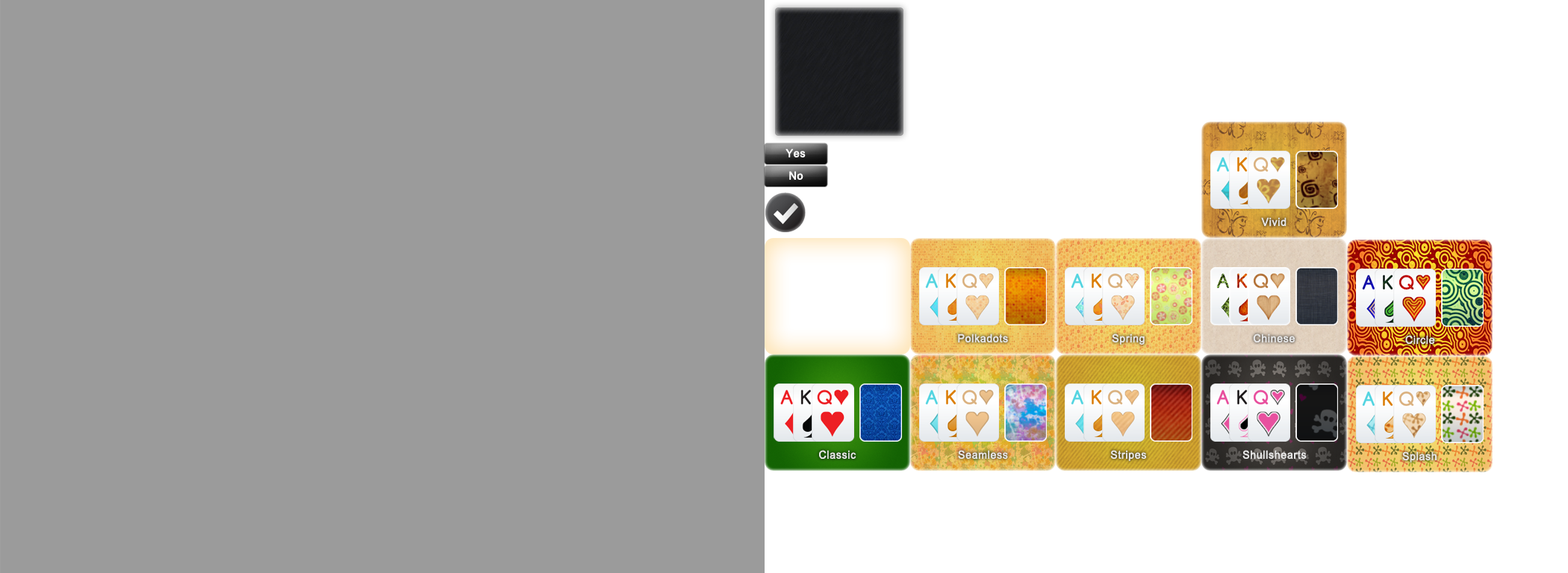
<style>
.page{position:relative;width:1568px;height:573px;background:#9b9b9b}
.page>*{position:absolute;margin:0}
.t1{font:11.1px "ArialMT";letter-spacing:0.025em;color:#ffffff;font-weight:bold;scale:0.95 1}
.t2{font:11.1px "ArialMT";letter-spacing:0.025em;color:#ffffff;font-weight:bold;scale:0.96 1}
.t3{font:11px "ArialMT";letter-spacing:0.025em;color:#e6e6e6;font-weight:bold;scale:0.95 1}
</style>
<div class="page">
<p class="t1" style="left:785px;top:149px;width:21px;height:9px">Yes</p>
<p class="t2" style="left:789px;top:171px;width:14px;height:9px">No</p>
<p class="t3" style="left:1261px;top:217px;width:26px;height:9px">Vivid</p>
<p class="t3" style="left:958px;top:334px;width:50px;height:9px">Polkadots</p>
<p class="t3" style="left:1112px;top:334px;width:33px;height:11px">Spring</p>
<p class="t3" style="left:1253px;top:334px;width:42px;height:9px">Chinese</p>
<p class="t3" style="left:1405px;top:335px;width:30px;height:9px">Circle</p>
<p class="t3" style="left:819px;top:450px;width:37px;height:9px">Classic</p>
<p class="t3" style="left:958px;top:450px;width:50px;height:9px">Seamless</p>
<p class="t3" style="left:1110px;top:450px;width:37px;height:11px">Stripes</p>
<p class="t3" style="left:1242px;top:450px;width:65px;height:9px">Shullshearts</p>
<p class="t3" style="left:1402px;top:452px;width:35px;height:11px">Splash</p>
</div>
